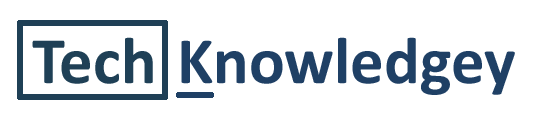
<style>
.page{position:relative;width:549px;height:116px;background:#ffffff}
.page>*{position:absolute;margin:0}
.t1{font:66.7px "Calibri-Bold";color:#1f4065}
.t2{font:66.7px "Calibri-Bold";color:#1f4056}
</style>
<div class="page">
<p class="t1" style="left:32px;top:37px;width:483px;height:58px"><span class="t2">Tech  </span>Knowledgey</p>
</div>
